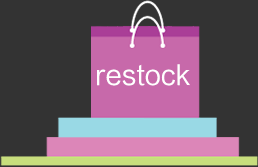
<style>
.page{position:relative;width:258px;height:167px;background:#333333}
.page>*{position:absolute;margin:0}
.t1{font:26.6px "LTHYSZK";color:#ffffff}
</style>
<div class="page">
<p class="t1" style="left:97px;top:64px;width:93px;height:22px">restock</p>
</div>
